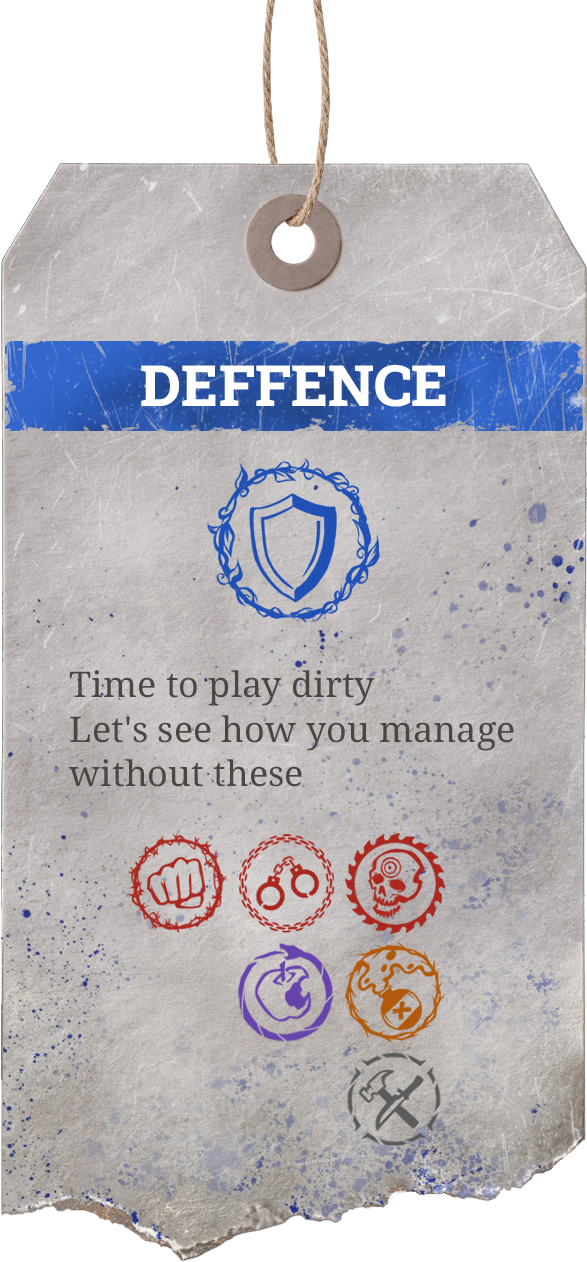
<style>
.page{position:relative;width:587px;height:1262px}
.page>*{position:absolute;margin:0}
.t1{font:57.1px "RobotoSlab-ExtraBold";color:#ffffff}
.t2{font:35.3px/44.6px "NotoSerif-Medium";color:#4b4544}
</style>
<div class="page">
<p class="t1" style="left:141px;top:364px;width:305px;height:43px">DEFFENCE</p>
<p class="t2" style="left:69px;top:670px;width:445px;height:117px">Time to play dirty<br>Let's see how you manage without these</p>
</div>
